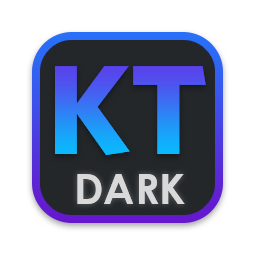
<style>
.page{position:relative;width:256px;height:256px;background:#ffffff}
.page>*{position:absolute;margin:0}
.t1{font:127px "Whitney-Bold";color:#0074ea}
.t2{font:42.3px "CenturyGothic-Bold";color:#dadada}
</style>
<div class="page">
<p class="t1" style="left:55px;top:66px;width:151px;height:89px">KT</p>
<p class="t2" style="left:77px;top:174px;width:108px;height:30px">DARK</p>
</div>
